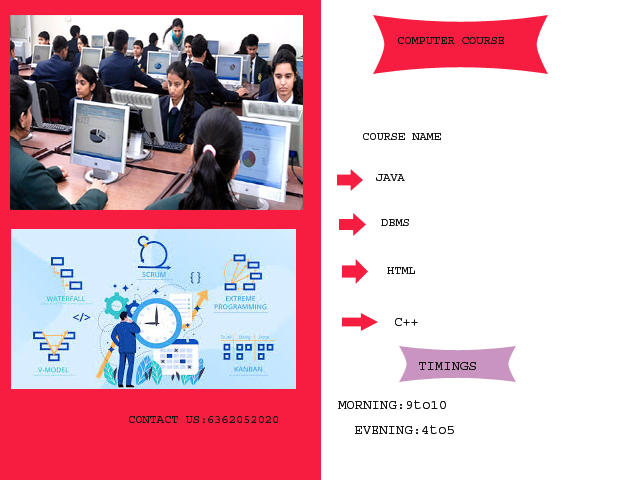
<style>
.page{position:relative;width:640px;height:480px;background:#ffffff}
.page>*{position:absolute;margin:0}
.t1{font:12px "Courier";color:#171514}
.t2{font:14px "Courier";color:#171514}
</style>
<div class="page">
<p class="t1" style="left:398px;top:37px;width:106px;height:7px">COMPUTER COURSE</p>
<p class="t1" style="left:363px;top:133px;width:78px;height:7px">COURSE NAME</p>
<p class="t1" style="left:376px;top:174px;width:29px;height:7px">JAVA</p>
<p class="t1" style="left:381px;top:219px;width:28px;height:7px">DBMS</p>
<p class="t1" style="left:387px;top:267px;width:28px;height:7px">HTML</p>
<p class="t2" style="left:395px;top:318px;width:23px;height:8px">C++</p>
<p class="t2" style="left:419px;top:362px;width:57px;height:8px">TIMINGS</p>
<p class="t2" style="left:338px;top:400px;width:108px;height:9px">MORNING:9to10</p>
<p class="t1" style="left:129px;top:416px;width:149px;height:7px">CONTACT US:6362052020</p>
<p class="t2" style="left:355px;top:425px;width:99px;height:9px">EVENING:4to5</p>
</div>
